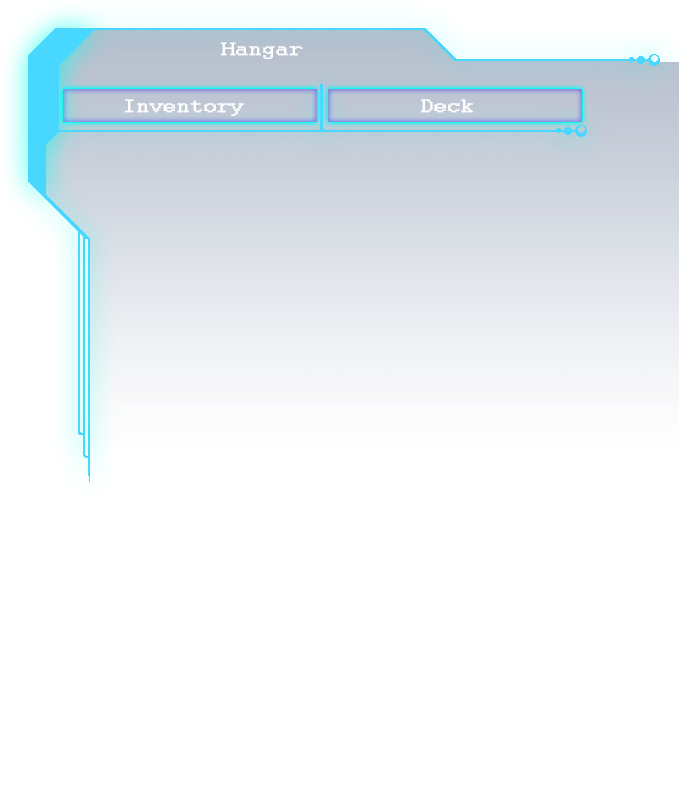
<style>
.page{position:relative;width:689px;height:794px;background:#ffffff}
.page>*{position:absolute;margin:0}
.t1{font:20px "Courier";color:#ffffff;font-weight:bold;scale:1.19 1}
</style>
<div class="page">
<p class="t1" style="left:221px;top:42px;width:82px;height:17px">Hangar</p>
<p class="t1" style="left:125px;top:99px;width:119px;height:17px">Inventory</p>
<p class="t1" style="left:421px;top:99px;width:52px;height:14px">Deck</p>
</div>
